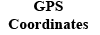
<style>
.page{position:relative;width:100px;height:35px;background:#ffffff}
.page>*{position:absolute;margin:0}
.t1{font:15.4px "TimesNewRomanPS-BoldMT";color:#000000}
</style>
<div class="page">
<p class="t1" style="left:8px;top:1px;width:80px;height:28px;text-align:center">GPS<br>Coordinates</p>
</div>
